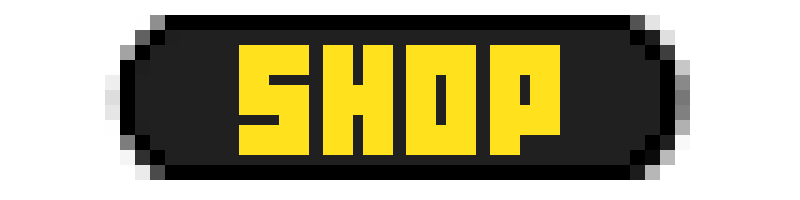
<style>
.page{position:relative;width:800px;height:200px;background:#ffffff}
.page>*{position:absolute;margin:0}
.t1{font:140px "04b19";letter-spacing:0.025em;color:#ffe21d}
</style>
<div class="page">
<p class="t1" style="left:239px;top:45px;width:321px;height:110px">SHOP</p>
</div>
